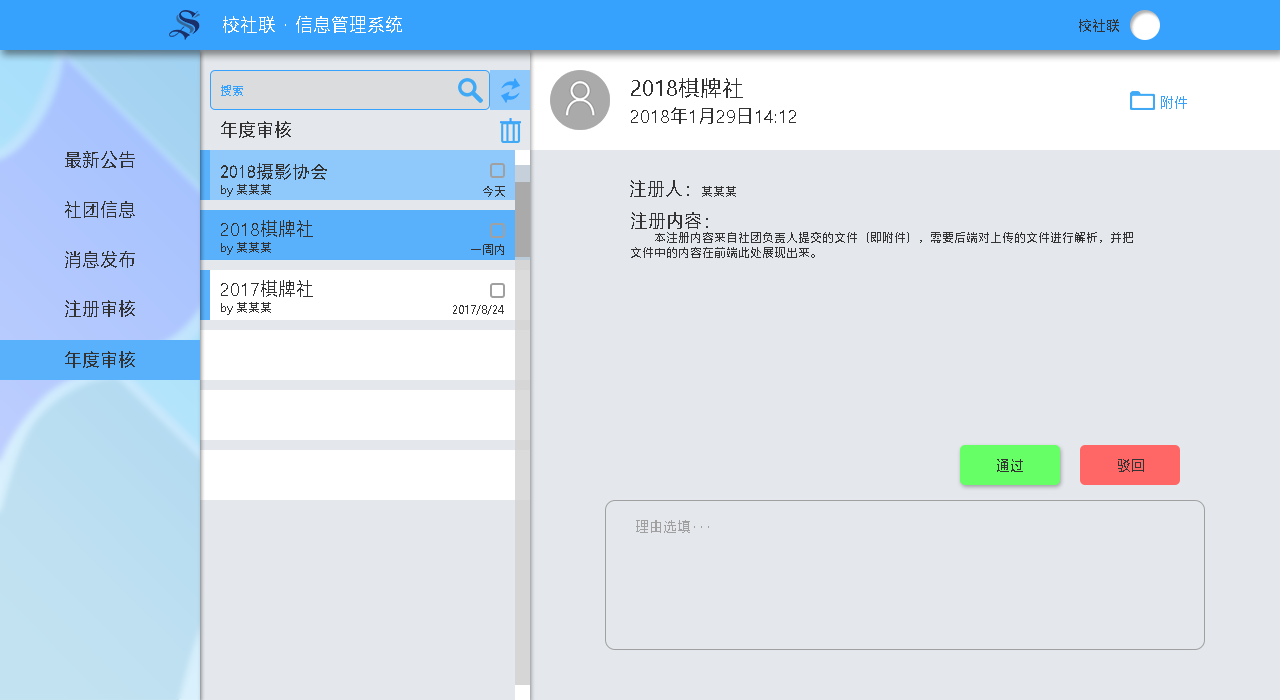
<style>
.page{position:relative;width:1280px;height:700px;background:#e4e8ec}
.page>*{position:absolute;margin:0}
.t1{font:18px "MicrosoftYaHei";color:#ffffff}
.t2{font:14px "MicrosoftYaHei";color:#333333}
.t3{font:22px "MicrosoftYaHei";color:#333333}
.t4{font:12px "MicrosoftYaHei";color:#37a2fe}
.t5{font:14px "MicrosoftYaHei";color:#37a2fe}
.t6{font:18px "MicrosoftYaHei";color:#333333}
.t7{font:18px "SimHei";color:#333333}
.t8{font:12px "MicrosoftYaHei";color:#333333}
.t9{font:14px "MicrosoftYaHei";color:#a0a0a0}
</style>
<div class="page">
<p class="t1" style="left:223px;top:16px;width:179px;height:17px">校社联 · 信息管理系统</p>
<p class="t2" style="left:1079px;top:19px;width:40px;height:13px">校社联</p>
<p class="t3" style="left:631px;top:78px;width:112px;height:20px">2018棋牌社</p>
<p class="t4" style="left:221px;top:85px;width:22px;height:11px">搜索</p>
<p class="t5" style="left:1161px;top:96px;width:26px;height:13px">附件</p>
<p class="t6" style="left:631px;top:107px;width:165px;height:17px">2018年1月29日14:12</p>
<p class="t6" style="left:221px;top:121px;width:70px;height:17px">年度审核</p>
<p class="t6" style="left:65px;top:151px;width:70px;height:17px">最新公告</p>
<p class="t7" style="left:221px;top:163px;width:106px;height:17px">2018摄影协会</p>
<p class="t8" style="left:221px;top:184px;width:50px;height:13px">by 某某某</p>
<p class="t6" style="left:630px;top:180px;width:106px;height:17px">注册人：<span class="t8">某某某</span></p>
<p class="t8" style="left:483px;top:186px;width:22px;height:11px">今天</p>
<p class="t6" style="left:65px;top:201px;width:70px;height:17px">社团信息</p>
<p class="t6" style="left:221px;top:220px;width:92px;height:17px">2018棋牌社</p>
<p class="t8" style="left:631px;top:212px;width:502px;height:46px"><span class="t6">注册内容：</span><br>        本注册内容来自社团负责人提交的文件（即附件），需要后端对上传的文件进行解析，并把<br>文件中的内容在前端此处展现出来。</p>
<p class="t8" style="left:221px;top:242px;width:50px;height:13px">by 某某某</p>
<p class="t8" style="left:471px;top:244px;width:33px;height:11px">一周内</p>
<p class="t6" style="left:65px;top:251px;width:70px;height:17px">消息发布</p>
<p class="t6" style="left:221px;top:280px;width:92px;height:17px">2017棋牌社</p>
<p class="t6" style="left:65px;top:300px;width:70px;height:17px">注册审核</p>
<p class="t8" style="left:221px;top:302px;width:50px;height:13px">by 某某某</p>
<p class="t8" style="left:453px;top:305px;width:51px;height:10px">2017/8/24</p>
<p class="t6" style="left:65px;top:351px;width:70px;height:17px">年度审核</p>
<p class="t2" style="left:997px;top:459px;width:26px;height:13px">通过</p>
<p class="t2" style="left:1118px;top:459px;width:26px;height:13px">驳回</p>
<p class="t9" style="left:636px;top:520px;width:73px;height:13px">理由选填···</p>
</div>
